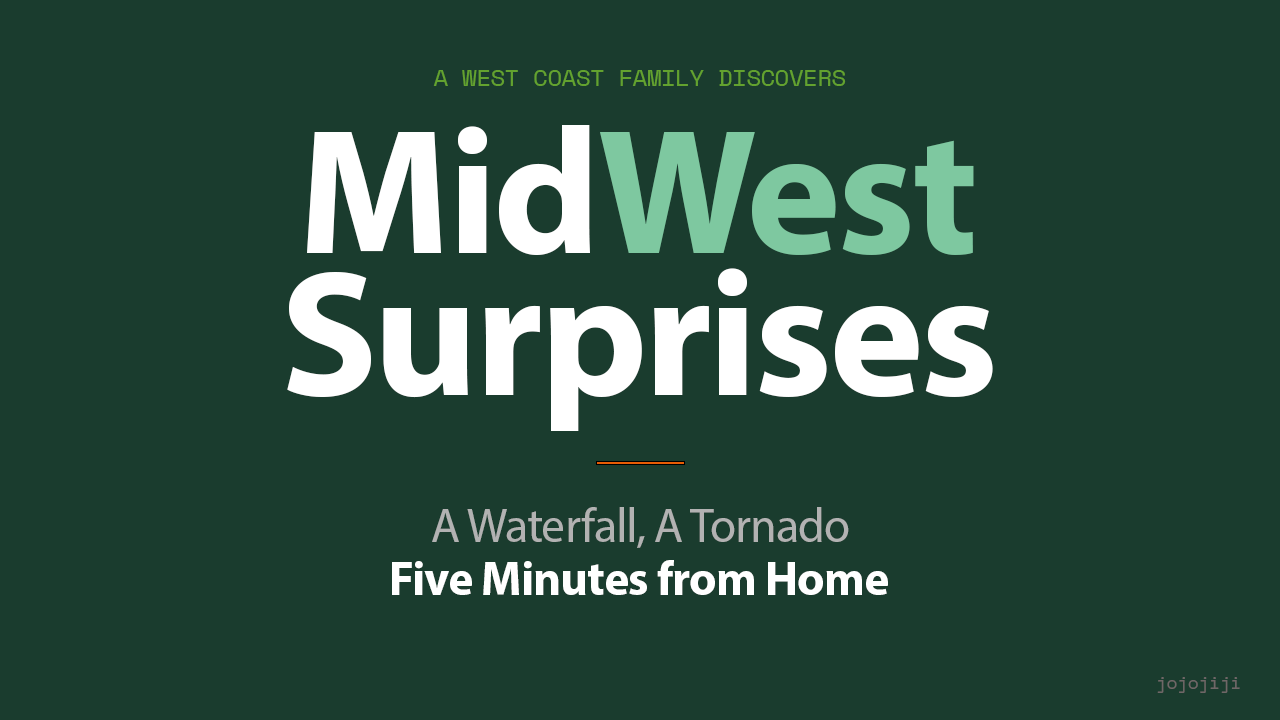
<style>
.page{position:relative;width:1280px;height:720px;background:#1a3c2e}
.page>*{position:absolute;margin:0}
.t1{font:24px "SpaceMono-Regular";letter-spacing:-0.02em;color:#63a22f}
.t2{font:180px "MyriadPro-Bold";letter-spacing:-0.02em;color:#7ec8a0}
.t3{font:180px "MyriadPro-Bold";letter-spacing:-0.02em;color:#ffffff}
.t4{font:48px "MyriadPro-Regular";letter-spacing:-0.02em;color:#b2b2b2}
.t5{font:48px "MyriadPro-Bold";letter-spacing:-0.02em;color:#ffffff}
.t6{font:18px "SpaceMono-Regular";letter-spacing:-0.02em;color:#6f6767}
</style>
<div class="page">
<p class="t1" style="left:433px;top:70px;width:413px;height:16px">A WEST COAST FAMILY DISCOVERS</p>
<p class="t2" style="left:307px;top:125px;width:667px;height:130px"><span class="t3">Mid</span>West</p>
<p class="t3" style="left:287px;top:268px;width:706px;height:163px">Surprises</p>
<p class="t4" style="left:432px;top:507px;width:417px;height:41px">A Waterfall, A Tornado</p>
<p class="t5" style="left:392px;top:560px;width:496px;height:35px">Five Minutes from Home</p>
<p class="t6" style="left:1157px;top:677px;width:83px;height:16px">jojojiji</p>
</div>
